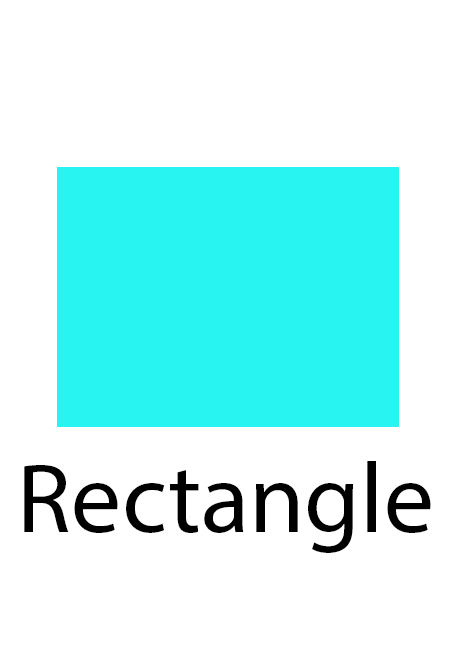
<style>
.page{position:relative;width:450px;height:650px;background:#ffffff}
.page>*{position:absolute;margin:0}
.t1{font:100px "MyriadHebrew-Regular";color:#000000}
</style>
<div class="page">
<p class="t1" style="left:24px;top:461px;width:407px;height:92px">Rectangle</p>
</div>
